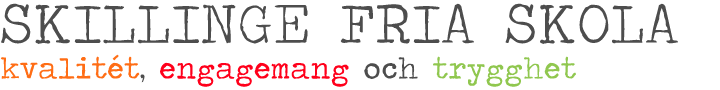
<style>
.page{position:relative;width:720px;height:90px;background:#ffffff}
.page>*{position:absolute;margin:0}
.t1{font:60px "TravelingTypewriter";letter-spacing:0.025em;color:#4d4d4d}
.t2{font:30px "TravelingTypewriter";letter-spacing:0.025em;color:#ff6d15}
.t3{font:30px "TravelingTypewriter";letter-spacing:0.025em;color:#4d4d4d}
.t4{font:30px "TravelingTypewriter";letter-spacing:0.025em;color:#ff001b}
.t5{font:30px "TravelingTypewriter";letter-spacing:0.025em;color:#90c74f}
</style>
<div class="page">
<p class="t1" style="left:1px;top:3px;width:677px;height:84px">SKILLINGE FRIA SKOLA<br><span class="t2">kvalitét</span><span class="t3">, </span><span class="t4">engagemang </span><span class="t3">och </span><span class="t5">trygghet</span></p>
</div>
